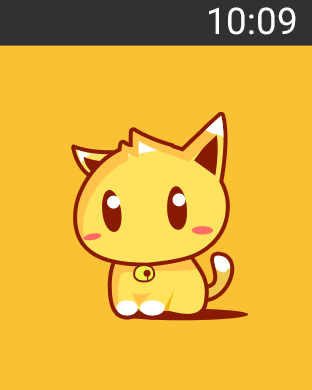
<style>
.page{position:relative;width:312px;height:390px;background:#f9c133}
.page>*{position:absolute;margin:0}
.t1{font:36.7px "Roboto-Regular";color:#ffffff}
</style>
<div class="page">
<p class="t1" style="left:209px;top:7px;width:87px;height:28px">10:09</p>
</div>
